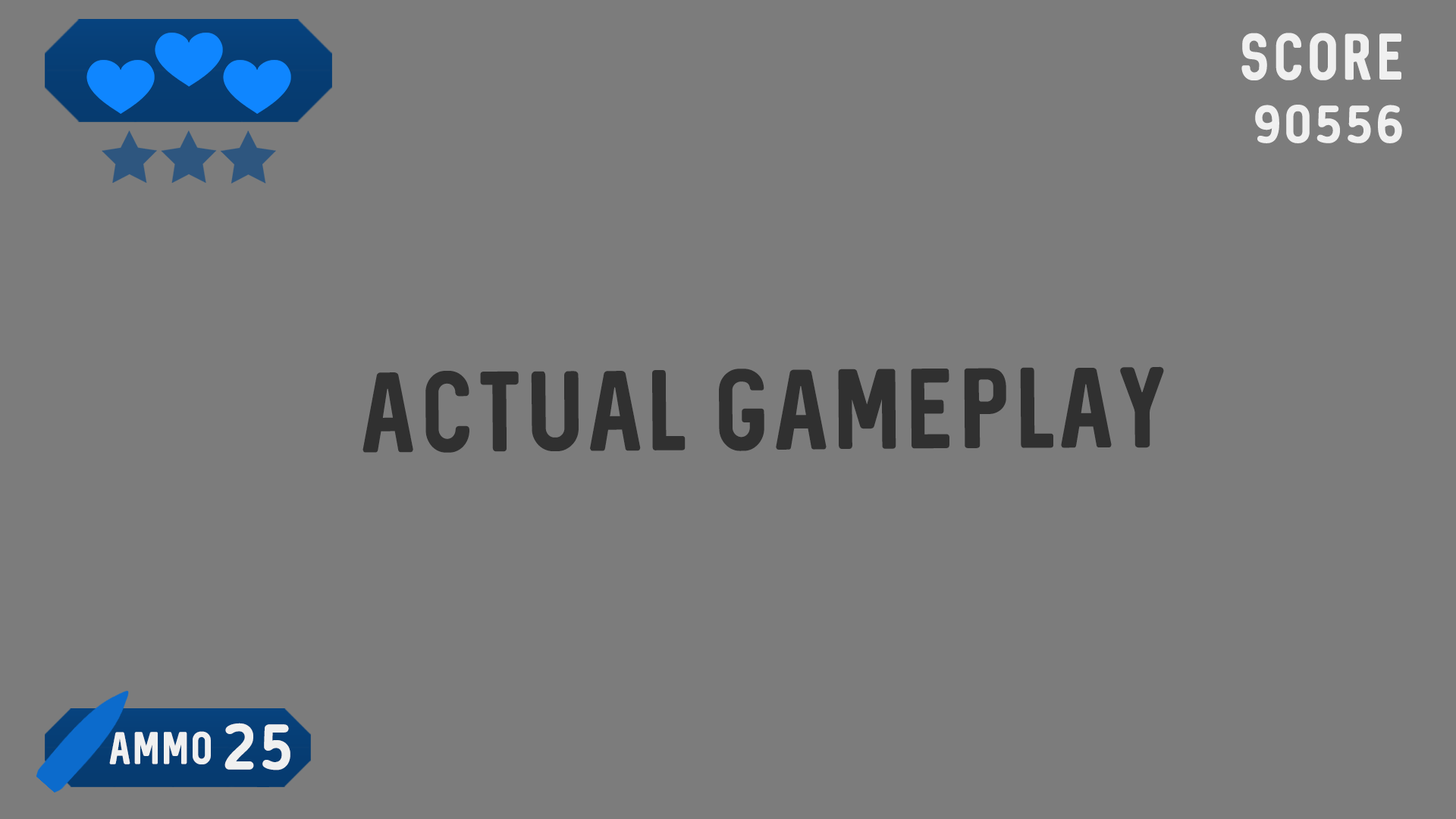
<style>
.page{position:relative;width:1456px;height:819px;background:#7c7c7c}
.page>*{position:absolute;margin:0}
.t1{font:52.5px "Sequel-Regular";letter-spacing:0.075em;color:#f0f0f0;text-transform:uppercase;scale:0.95 1}
.t2{font:52.5px "BloggerSans-Bold";letter-spacing:0.075em;color:#f0f0f0;text-transform:uppercase;scale:0.95 1}
.t3{font:91px "Sequel-Regular";letter-spacing:0.075em;color:#303030;text-transform:uppercase;scale:0.95 1}
.t4{font:63.5px "BloggerSans-Bold";letter-spacing:0.075em;color:#f0f0f0;text-transform:uppercase;scale:0.95 1}
.t5{font:36.4px "Sequel-Regular";letter-spacing:0.075em;color:#f0f0f0;text-transform:uppercase;scale:0.95 1}
</style>
<div class="page">
<p class="t1" style="left:1241px;top:33px;width:161px;height:110px;text-align:right">Score<br><span class="t2">90556</span></p>
<p class="t3" style="left:362px;top:366px;width:802px;height:87px">Actual gameplay</p>
<p class="t4" style="left:224px;top:723px;width:66px;height:47px">25</p>
<p class="t5" style="left:109px;top:731px;width:102px;height:33px">ammo</p>
</div>
